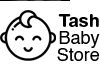
<style>
.page{position:relative;width:100px;height:70px;background:#ffffff}
.page>*{position:absolute;margin:0}
.t1{font:17.8px "HelveticaRounded-Bold";color:#000000}
.t2{font:17.8px "Helvetica";color:#000000}
</style>
<div class="page">
<p class="t1" style="left:58px;top:14px;width:41px;height:13px">Tash</p>
<p class="t2" style="left:59px;top:31px;width:41px;height:17px">Baby</p>
<p class="t2" style="left:57px;top:48px;width:43px;height:13px">Store</p>
</div>
